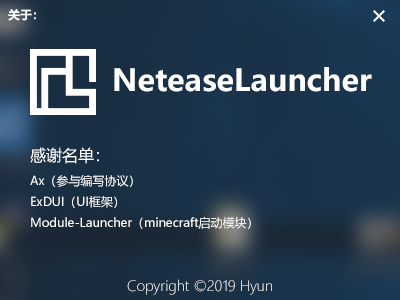
<style>
.page{position:relative;width:400px;height:300px}
.page>*{position:absolute;margin:0}
.t1{font:12px "MicrosoftYaHei-Bold";color:#ffffff}
.t2{font:30px "MicrosoftYaHei-Bold";color:#ffffff}
.t3{font:12px "MicrosoftYaHei";color:#ffffff}
.t4{font:16px "MicrosoftYaHei";color:#ffffff}
.t5{font:14px "MicrosoftYaHeiLight";color:#ffffff}
</style>
<div class="page">
<p class="t1" style="left:8px;top:9px;width:28px;height:12px">关于：</p>
<p class="t2" style="left:114px;top:67px;width:258px;height:25px">NeteaseLauncher</p>
<p class="t3" style="left:30px;top:147px;width:221px;height:82px"><span class="t4">感谢名单：<br></span>Ax（参与编写协议）<br>ExDUI（UI框架）<br>Module-Launcher（minecraft启动模块）</p>
<p class="t5" style="left:127px;top:279px;width:145px;height:16px">Copyright ©2019 Hyun</p>
</div>
